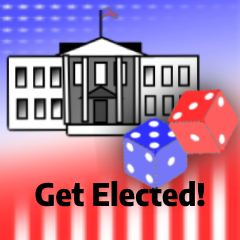
<style>
.page{position:relative;width:240px;height:240px}
.page>*{position:absolute;margin:0}
.t1{font:31px "EncodeSansSemiCondensed-ExtraBold";color:#000000}
</style>
<div class="page">
<p class="t1" style="left:35px;top:180px;width:170px;height:27px">Get Elected!</p>
</div>
